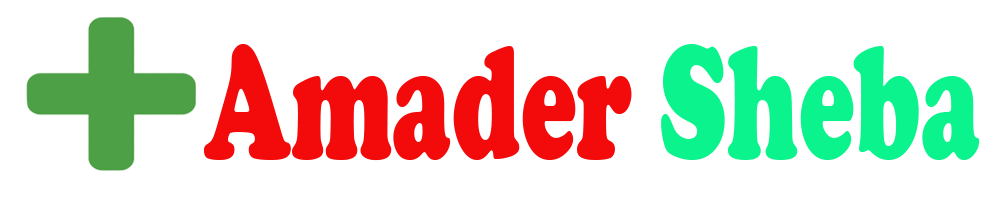
<style>
.page{position:relative;width:1000px;height:200px;background:#ffffff}
.page>*{position:absolute;margin:0}
.t1{font:168px "CooperBlack";color:#f30a0a;scale:0.63 1}
.t2{font:168px "CooperBlack";color:#0af38d;scale:0.63 1}
</style>
<div class="page">
<p class="t1" style="left:204px;top:44px;width:776px;height:117px">Amader <span class="t2">Sheba</span></p>
</div>
